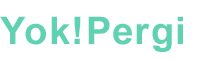
<style>
.page{position:relative;width:200px;height:60px;background:#ffffff}
.page>*{position:absolute;margin:0}
.t1{font:38px "Arial-BoldMT";letter-spacing:0.037em;color:#60d1b3}
</style>
<div class="page">
<p class="t1" style="left:0px;top:16px;width:183px;height:36px">Yok!Pergi</p>
</div>
